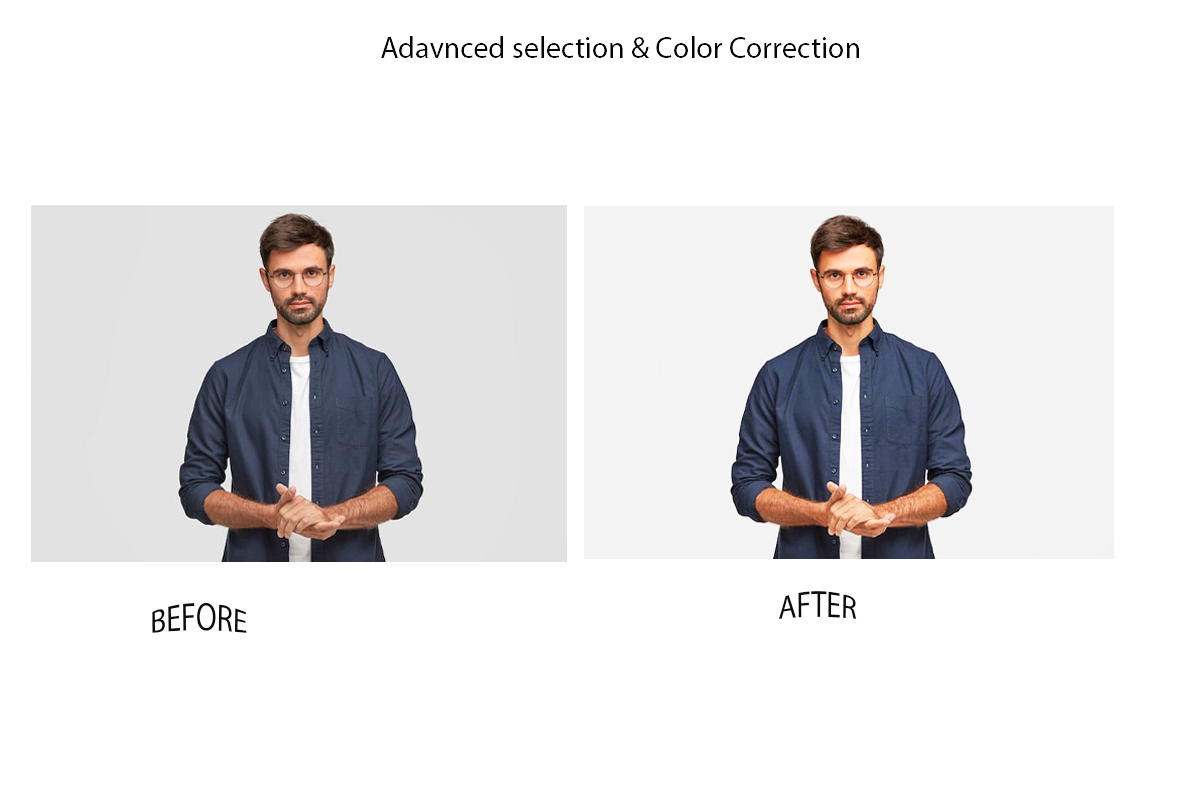
<style>
.page{position:relative;width:1200px;height:800px;background:#ffffff}
.page>*{position:absolute;margin:0}
.t1{font:30px "MyriadPro-Regular";color:#060506}
.t2{font:30px "MyriadPro-Regular";color:#0e0b0b}
</style>
<div class="page">
<p class="t1" style="left:381px;top:36px;width:478px;height:22px">Adavnced selection &amp; Color Correction</p>
<p class="t2" style="left:778px;top:591px;width:79px;height:28px">AFTER</p>
<p class="t2" style="left:152px;top:602px;width:95px;height:31px">BEFORE</p>
</div>
